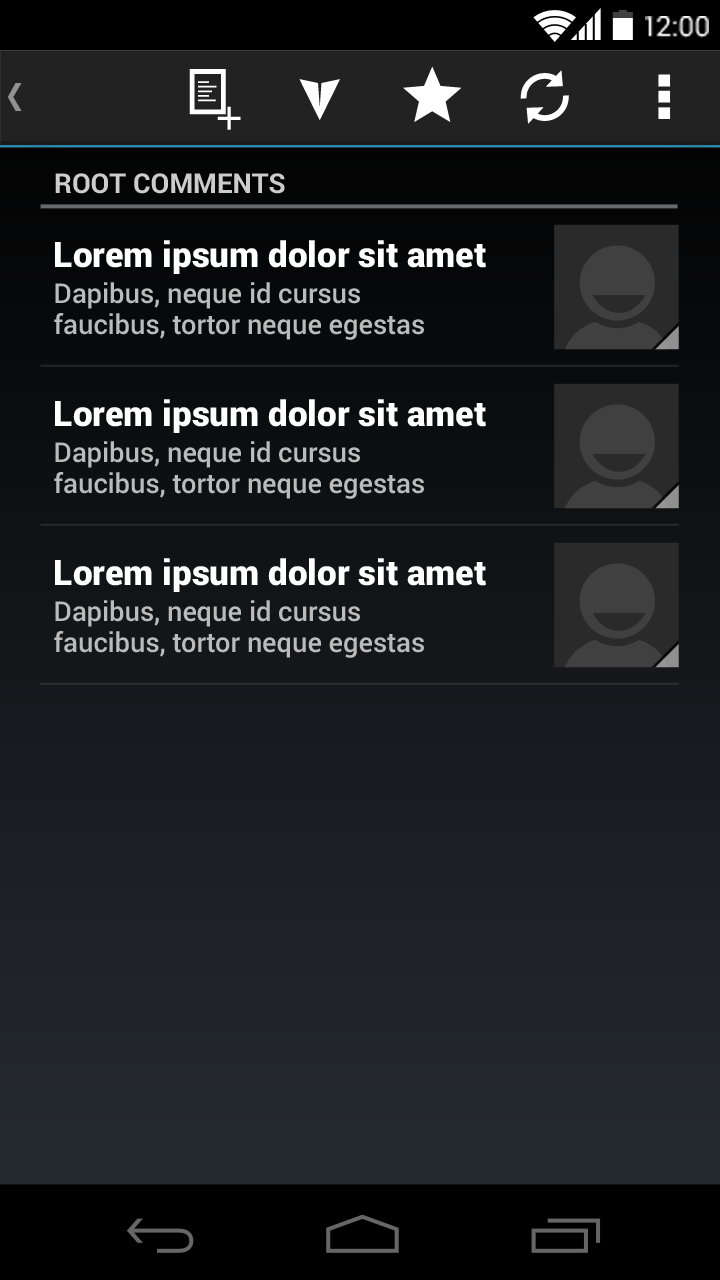
<style>
.page{position:relative;width:720px;height:1280px}
.page>*{position:absolute;margin:0}
.t1{font:28px "Roboto-Regular";color:#ffffff}
.t2{font:27.2px "Roboto-Bold";color:#cccccc}
.t3{font:35px "Roboto-Black";color:#ffffff}
.t4{font:27.2px/31.1px "Roboto-Medium";color:#bbbbbb}
</style>
<div class="page">
<p class="t1" style="left:645px;top:16px;width:64px;height:22px">12:00</p>
<p class="t2" style="left:55px;top:173px;width:230px;height:21px">ROOT COMMENTS</p>
<p class="t3" style="left:55px;top:240px;width:431px;height:34px">Lorem ipsum dolor sit amet</p>
<p class="t4" style="left:54px;top:282px;width:370px;height:58px">Dapibus, neque id cursus <br>faucibus, tortor neque egestas</p>
<p class="t3" style="left:55px;top:399px;width:431px;height:34px">Lorem ipsum dolor sit amet</p>
<p class="t4" style="left:54px;top:441px;width:370px;height:58px">Dapibus, neque id cursus <br>faucibus, tortor neque egestas</p>
<p class="t3" style="left:55px;top:558px;width:431px;height:34px">Lorem ipsum dolor sit amet</p>
<p class="t4" style="left:54px;top:600px;width:370px;height:58px">Dapibus, neque id cursus <br>faucibus, tortor neque egestas</p>
</div>
